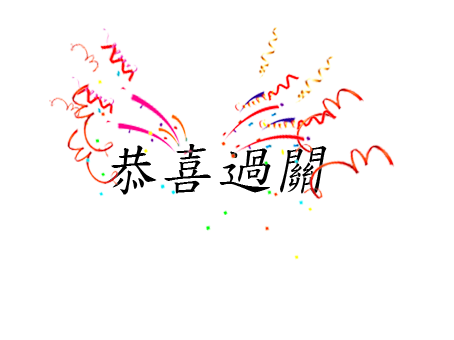
<style>
.page{position:relative;width:454px;height:340px;background:#ffffff}
.page>*{position:absolute;margin:0}
.t1{font:56px "DFKaiShu-SB-Estd-BF";letter-spacing:0.01em;color:#000000;font-style:italic}
</style>
<div class="page">
<p class="t1" style="left:104px;top:144px;width:223px;height:51px">恭喜過關</p>
</div>
